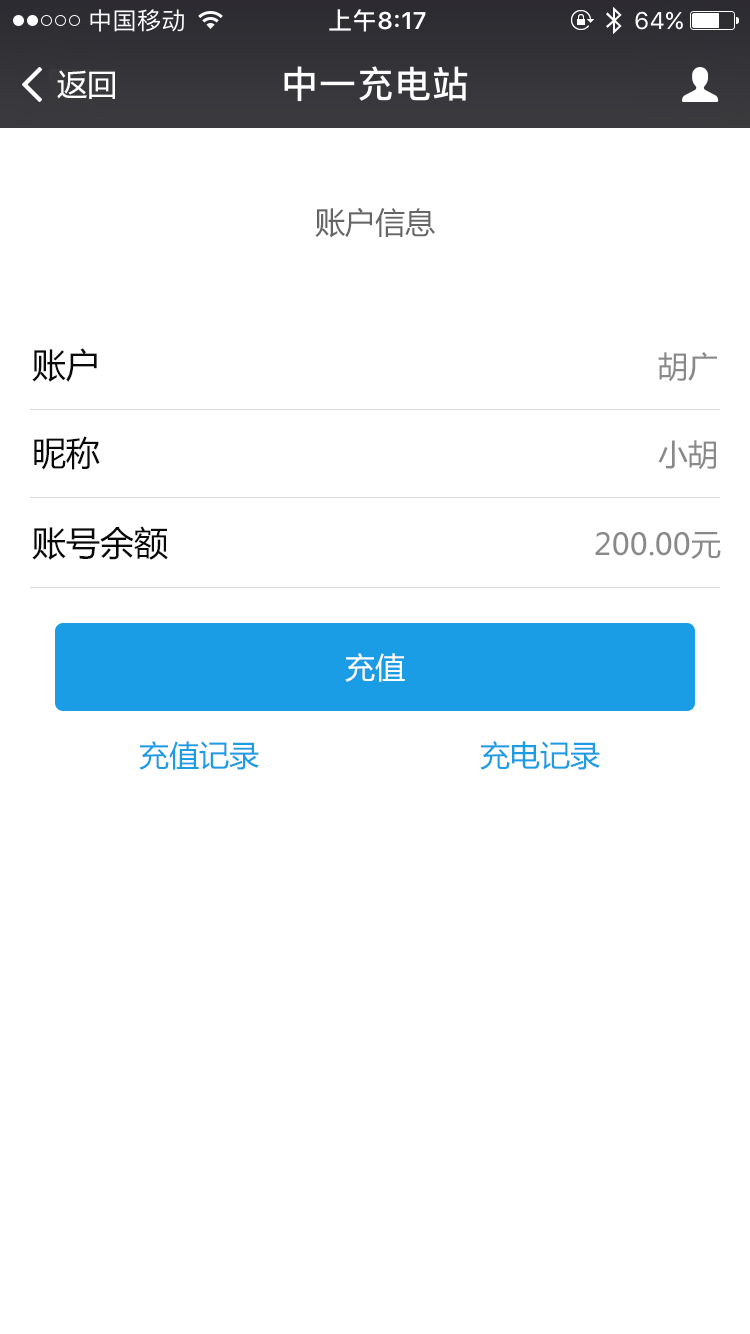
<style>
.page{position:relative;width:750px;height:1334px;background:#ffffff}
.page>*{position:absolute;margin:0}
.t1{font:30px "MicrosoftYaHei";color:#ffffff}
.t2{font:30px "MicrosoftYaHei";color:#666666}
.t3{font:34px "MicrosoftYaHei";color:#090909}
.t4{font:30px "MicrosoftYaHei";color:#898989}
.t5{font:30px "MicrosoftYaHei";color:#1b9de6}
</style>
<div class="page">
<p class="t1" style="left:57px;top:70px;width:58px;height:29px">返回</p>
<p class="t2" style="left:315px;top:207px;width:120px;height:31px">账户信息</p>
<p class="t3" style="left:32px;top:348px;width:65px;height:34px">账户</p>
<p class="t4" style="left:658px;top:352px;width:59px;height:30px">胡广</p>
<p class="t3" style="left:34px;top:436px;width:66px;height:34px">昵称</p>
<p class="t4" style="left:658px;top:440px;width:58px;height:30px">小胡</p>
<p class="t3" style="left:32px;top:526px;width:136px;height:34px">账号余额</p>
<p class="t4" style="left:595px;top:532px;width:126px;height:27px">200.00元</p>
<p class="t1" style="left:345px;top:653px;width:60px;height:29px">充值</p>
<p class="t5" style="left:139px;top:741px;width:120px;height:29px">充值记录</p>
<p class="t5" style="left:480px;top:741px;width:120px;height:29px">充电记录</p>
</div>
